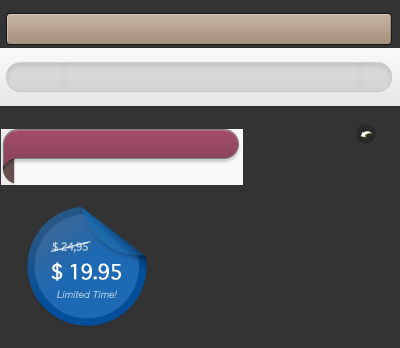
<style>
.page{position:relative;width:400px;height:348px;background:#333333}
.page>*{position:absolute;margin:0}
.t1{font:10.5px "Geneva";letter-spacing:-0.075em;color:#c1d2e4}
.t2{font:19.5px "Geneva";letter-spacing:-0.075em;color:#ffffff;font-weight:bold}
.t3{font:10px "HelveticaNeue-Italic";color:#bcd2e9}
</style>
<div class="page">
<p class="t1" style="left:52px;top:241px;width:36px;height:12px">$ 24,95</p>
<p class="t2" style="left:51px;top:262px;width:70px;height:19px">$ 19.95</p>
<p class="t3" style="left:57px;top:290px;width:60px;height:8px">Limited Time!</p>
</div>
